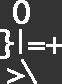
<style>
.page{position:relative;width:62px;height:84px;background:#333333}
.page>*{position:absolute;margin:0}
.t1{font:30px/30px "Monaco";letter-spacing:-0.025em;color:#ffffff;font-weight:bold}
</style>
<div class="page">
<p class="t1" style="left:0px;top:0px;width:63px;height:84px;text-align:center">O<br> }|=+<br>&gt;\</p>
</div>
